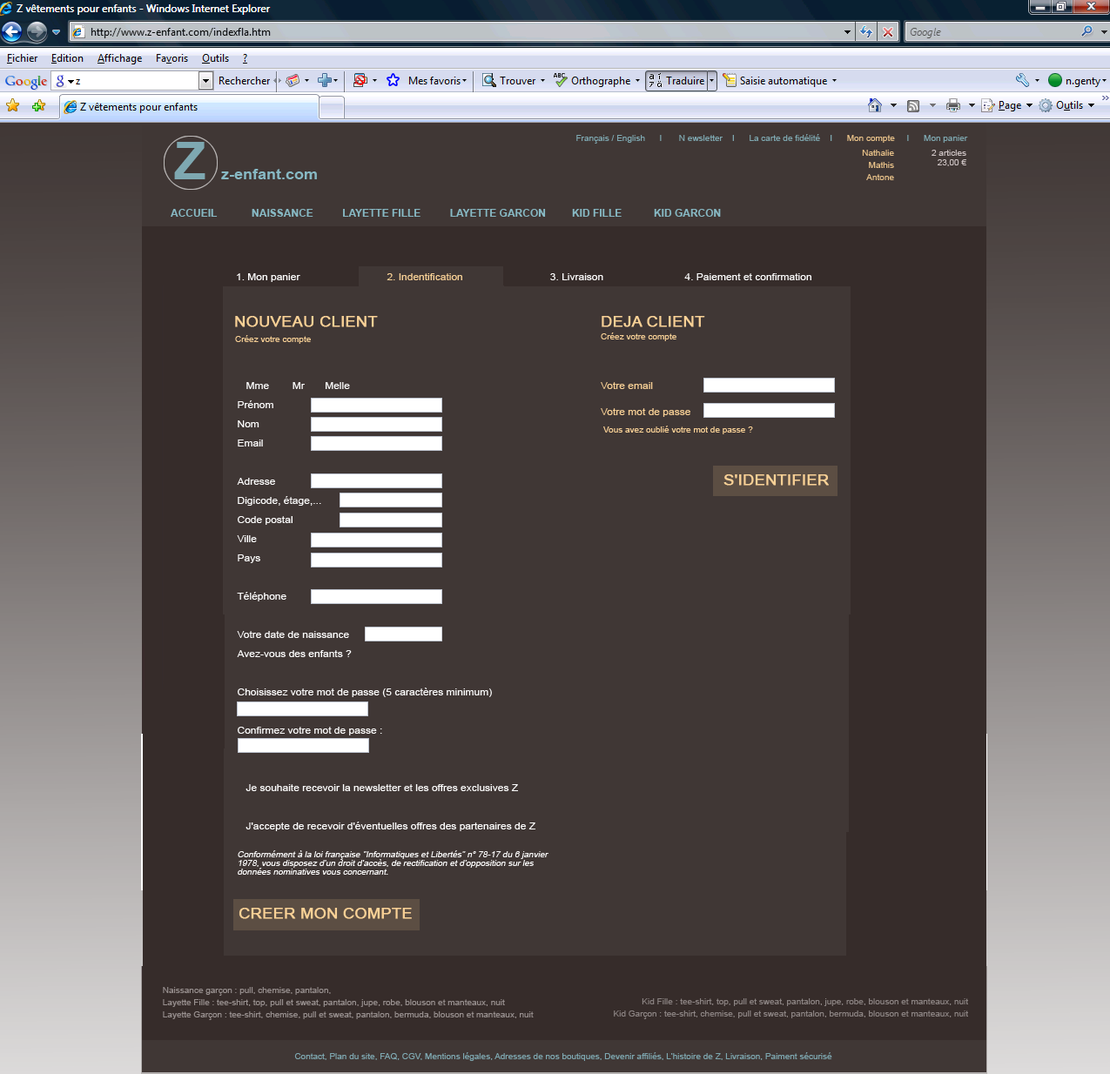
<style>
.page{position:relative;width:1110px;height:1074px;background:#403735}
.page>*{position:absolute;margin:0}
.t1{font:9.4px "ArialMT";color:#ffffff;scale:1.11 1}
.t2{font:9.4px "ArialMT";color:#f9d196;scale:1.11 1}
.t3{font:14.1px "ArialMT";color:#f9d196;font-weight:bold;scale:1.11 1}
.t4{font:7.8px "ArialMT";color:#f9d196;scale:1.11 1}
.t5{font:9.4px/19.2px "ArialMT";color:#fefefe;scale:1.11 1}
.t6{font:7.8px/8.7px "ArialMT";color:#fefefe;font-style:italic;scale:1.11 1}
.t7{font:9.4px/8.7px "ArialMT";color:#f9d196;scale:1.11 1}
</style>
<div class="page">
<p class="t1" style="left:237px;top:273px;width:574px;height:9px">1. Mon panier                             <span class="t2"> 2. Indentification          </span>                    3. Livraison                            4. Paiement et confirmation</p>
<p class="t3" style="left:235px;top:316px;width:143px;height:11px">NOUVEAU CLIENT</p>
<p class="t3" style="left:602px;top:316px;width:103px;height:11px">DEJA CLIENT</p>
<p class="t4" style="left:235px;top:335px;width:76px;height:9px">Créez votre compte</p>
<p class="t4" style="left:601px;top:333px;width:75px;height:8px">Créez votre compte</p>
<p class="t5" style="left:237px;top:382px;width:311px;height:493px">Mme        Mr       Melle<br>Prénom<br>Nom<br>Email<br><br>Adresse<br>Digicode, étage,...<br>Code postal<br>Ville<br>Pays<br><br>Téléphone<br><br>Votre date de naissance<br>Avez-vous des enfants ?<br><br>Choisissez votre mot de passe (5 caractères minimum)<br><br>Confirmez votre mot de passe :<br><br>   <br>   Je souhaite recevoir la newsletter et les offres exclusives Z<br>   <br>   J'accepte de recevoir d'éventuelles offres des partenaires de Z<br><br><span class="t6">Conformément à la loi française "Informatiques et Libertés" n° 78-17 du 6 janvier<br>1978, vous disposez d'un droit d'accès, de rectification et d'opposition sur les<br>données nominatives vous concernant.</span></p>
<p class="t7" style="left:601px;top:382px;width:89px;height:35px">Votre email<br><br><br>Votre mot de passe</p>
<p class="t4" style="left:603px;top:426px;width:150px;height:8px">Vous avez oublié votre mot de passe ?</p>
<p class="t3" style="left:723px;top:474px;width:106px;height:12px">S'IDENTIFIER</p>
<p class="t3" style="left:239px;top:908px;width:173px;height:11px">CREER MON COMPTE</p>
</div>
